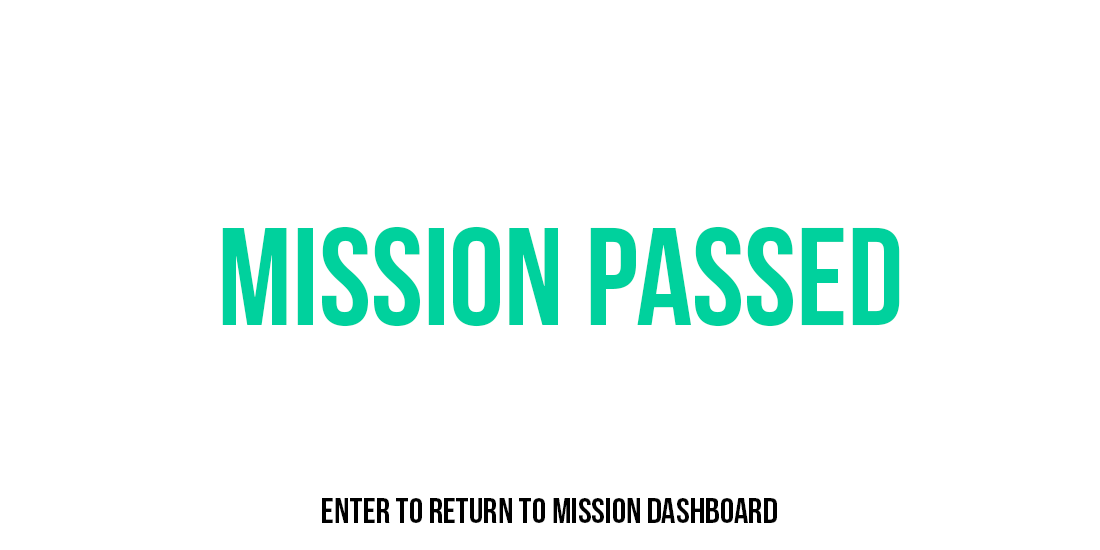
<style>
.page{position:relative;width:1100px;height:550px;background:#ffffff}
.page>*{position:absolute;margin:0}
.t1{font:138.9px "BebasNeue";color:#00d19d}
.t2{font:36px "BebasNeue";color:#000000}
</style>
<div class="page">
<p class="t1" style="left:222px;top:226px;width:678px;height:101px">MISSION PASSED</p>
<p class="t2" style="left:322px;top:498px;width:455px;height:25px">ENTER TO RETURN TO MISSION DASHBOARD</p>
</div>
